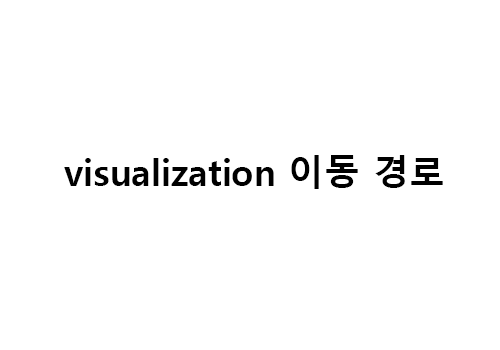
<style>
.page{position:relative;width:500px;height:350px;background:#ffffff}
.page>*{position:absolute;margin:0}
.t1{font:36px "MalgunGothicBold";color:#000000}
</style>
<div class="page">
<p class="t1" style="left:64px;top:155px;width:379px;height:34px">visualization 이동 경로</p>
</div>
